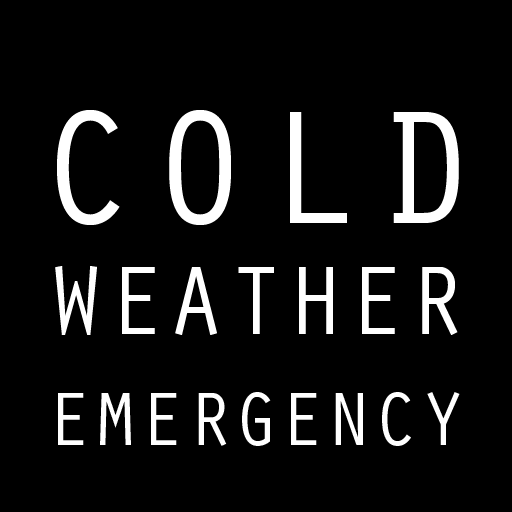
<style>
.page{position:relative;width:512px;height:512px;background:#000000}
.page>*{position:absolute;margin:0}
.t1{font:77.9px/111.3px "OratorStd";color:#ffffff}
.t2{font:167px/111.3px "OratorStd";letter-spacing:0.07em;color:#ffffff}
.t3{font:100.2px/111.3px "OratorStd";color:#ffffff}
</style>
<div class="page">
<p class="t1" style="left:55px;top:110px;width:405px;height:336px;text-align:center"><span class="t2">COLD<br></span><span class="t3">WEATHER<br></span>EMERGENCY</p>
</div>
